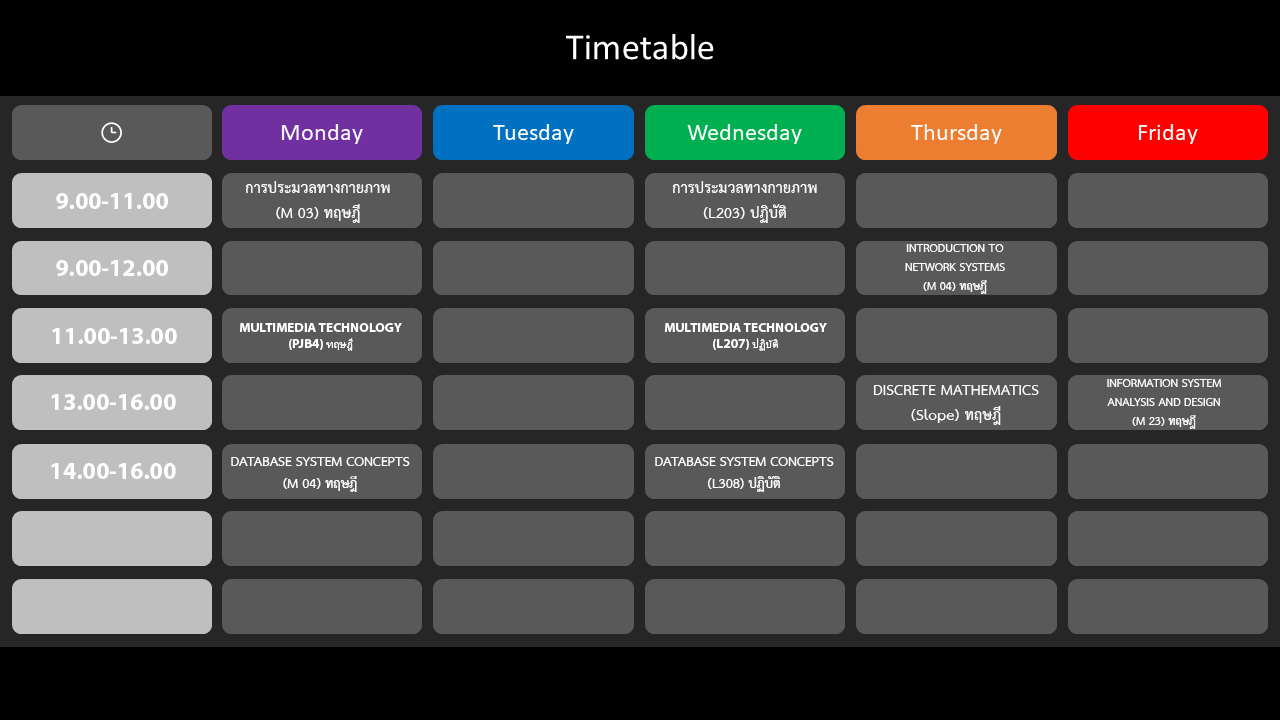
<style>
.page{position:relative;width:1280px;height:720px;background:#595959}
.page>*{position:absolute;margin:0}
.t1{font:21.3px "THSarabunPSK-Bold";color:#ffffff}
.t2{font:24px "MyriadPro-Bold";color:#ffffff}
.t3{font:16px "THSarabunPSK-Bold";color:#ffffff}
.t4{font:13.3px "MyriadPro-Bold";color:#ffffff}
.t5{font:13.3px "AdobeThai-Regular";color:#ffffff}
.t6{font:18.7px "THSarabunPSK-Bold";color:#ffffff}
</style>
<div class="page">
<p class="t1" style="left:245px;top:181px;width:145px;height:42px;text-align:center">การประมวลทางกายภาพ<br>(M 03) ทฤษฎี</p>
<p class="t1" style="left:672px;top:181px;width:145px;height:42px;text-align:center">การประมวลทางกายภาพ<br>(L203) ปฏิบัติ</p>
<p class="t2" style="left:56px;top:193px;width:112px;height:16px">9.00-11.00</p>
<p class="t3" style="left:905px;top:244px;width:100px;height:50px;text-align:center">INTRODUCTION TO<br>NETWORK SYSTEMS<br>(M 04) ทฤษฎี</p>
<p class="t2" style="left:56px;top:260px;width:112px;height:16px">9.00-12.00</p>
<p class="t2" style="left:52px;top:328px;width:125px;height:16px">11.00-13.00</p>
<p class="t4" style="left:239px;top:323px;width:163px;height:28px;text-align:center">MULTIMEDIA TECHNOLOGY<br>(PJB4) <span class="t5">ทฤษฎี</span></p>
<p class="t4" style="left:664px;top:323px;width:163px;height:28px;text-align:center">MULTIMEDIA TECHNOLOGY<br>(L207) <span class="t5">ปฏิบัติ</span></p>
<p class="t1" style="left:873px;top:385px;width:166px;height:40px;text-align:center">DISCRETE MATHEMATICS<br>(Slope) ทฤษฎี</p>
<p class="t3" style="left:1107px;top:379px;width:115px;height:50px;text-align:center">INFORMATION SYSTEM<br>ANALYSIS AND DESIGN<br>(M 23) ทฤษฎี</p>
<p class="t2" style="left:51px;top:394px;width:125px;height:16px">13.00-16.00</p>
<p class="t6" style="left:231px;top:457px;width:179px;height:35px;text-align:center">DATABASE SYSTEM CONCEPTS<br>(M 04) ทฤษฎี</p>
<p class="t6" style="left:655px;top:457px;width:179px;height:35px;text-align:center">DATABASE SYSTEM CONCEPTS<br>(L308) ปฏิบัติ</p>
<p class="t2" style="left:51px;top:463px;width:125px;height:16px">14.00-16.00</p>
</div>
